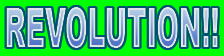
<style>
.page{position:relative;width:224px;height:56px;background:#00ff00}
.page>*{position:absolute;margin:0}
.t1{font:54.2px "Arial-Black";scale:0.5 1}
</style>
<div class="page">
<p class="t1" style="left:6px;top:7px;width:212px;height:41px">REVOLUTION!!</p>
</div>
